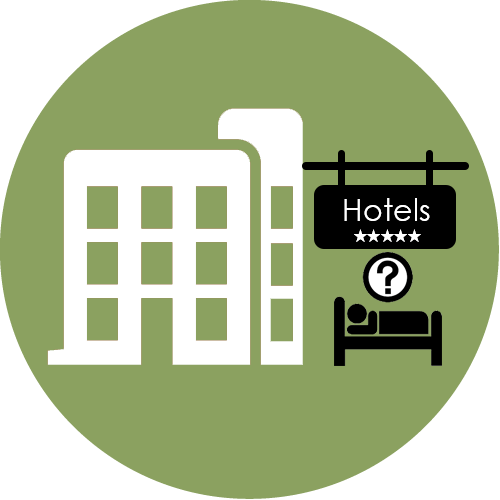
<style>
.page{position:relative;width:500px;height:500px;background:#8ba160}
.page>*{position:absolute;margin:0}
.t1{font:30px "CenturyGothic";color:#ffffff}
.t2{font:14px "KozGoPr6N-Regular";color:#ffffff}
</style>
<div class="page">
<p class="t1" style="left:344px;top:198px;width:86px;height:23px">Hotels</p>
<p class="t2" style="left:354px;top:229px;width:67px;height:13px">★★★★★</p>
</div>
